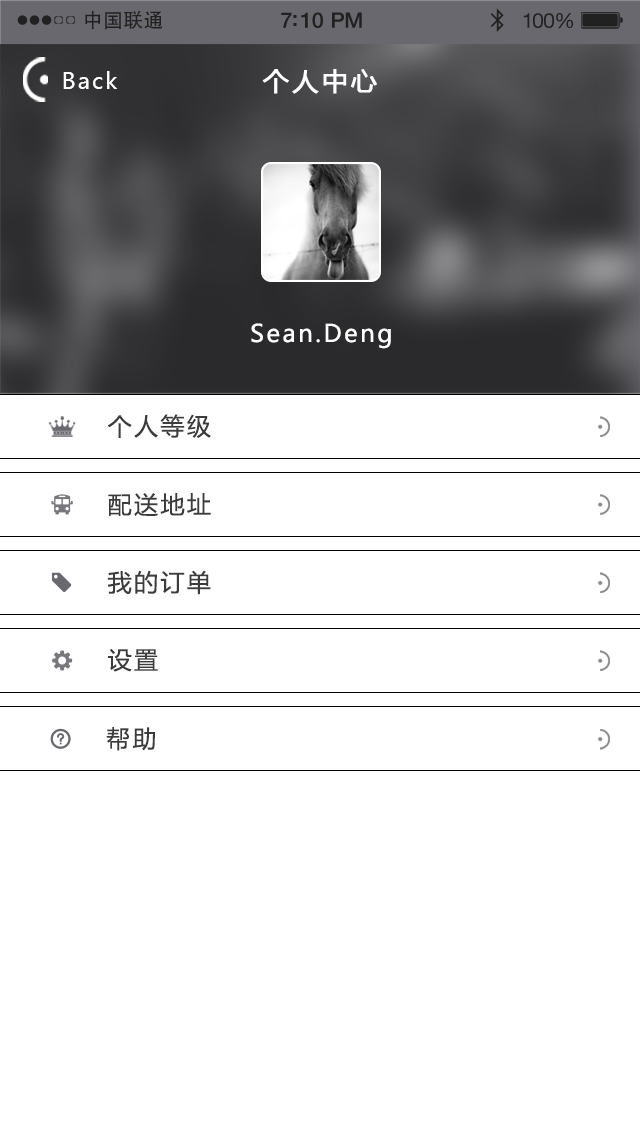
<style>
.page{position:relative;width:640px;height:1136px;background:#ffffff}
.page>*{position:absolute;margin:0}
.t1{font:19.7px "AdobeHeitiStd-Regular";letter-spacing:0.02em;color:#212121}
.t2{font:21.4px "HelveticaNeue-Medium";letter-spacing:-0.02em;color:#212121}
.t3{font:20.6px "HelveticaNeue";letter-spacing:-0.02em;color:#212121}
.t4{font:22px "MicrosoftYaHei";letter-spacing:0.1em;color:#ffffff}
.t5{font:26px "MicrosoftYaHei";letter-spacing:0.1em;color:#ffffff;font-weight:bold}
.t6{font:24px "MicrosoftYaHei";letter-spacing:0.1em;color:#ffffff}
.t7{font:24px "MicrosoftYaHei";letter-spacing:0.1em;color:#3c3c3c}
</style>
<div class="page">
<p class="t1" style="left:85px;top:10px;width:78px;height:20px">中国联通</p>
<p class="t2" style="left:281px;top:12px;width:81px;height:16px">7:10 PM</p>
<p class="t3" style="left:523px;top:13px;width:50px;height:16px">100%</p>
<p class="t4" style="left:63px;top:71px;width:55px;height:18px">Back</p>
<p class="t5" style="left:262px;top:69px;width:115px;height:25px">个人中心</p>
<p class="t6" style="left:251px;top:323px;width:140px;height:26px">Sean.Deng</p>
<p class="t7" style="left:107px;top:414px;width:104px;height:24px">个人等级</p>
<p class="t7" style="left:108px;top:493px;width:103px;height:23px">配送地址</p>
<p class="t7" style="left:107px;top:570px;width:104px;height:25px">我的订单</p>
<p class="t7" style="left:108px;top:648px;width:50px;height:24px">设置</p>
<p class="t7" style="left:106px;top:727px;width:49px;height:24px">帮助</p>
</div>
